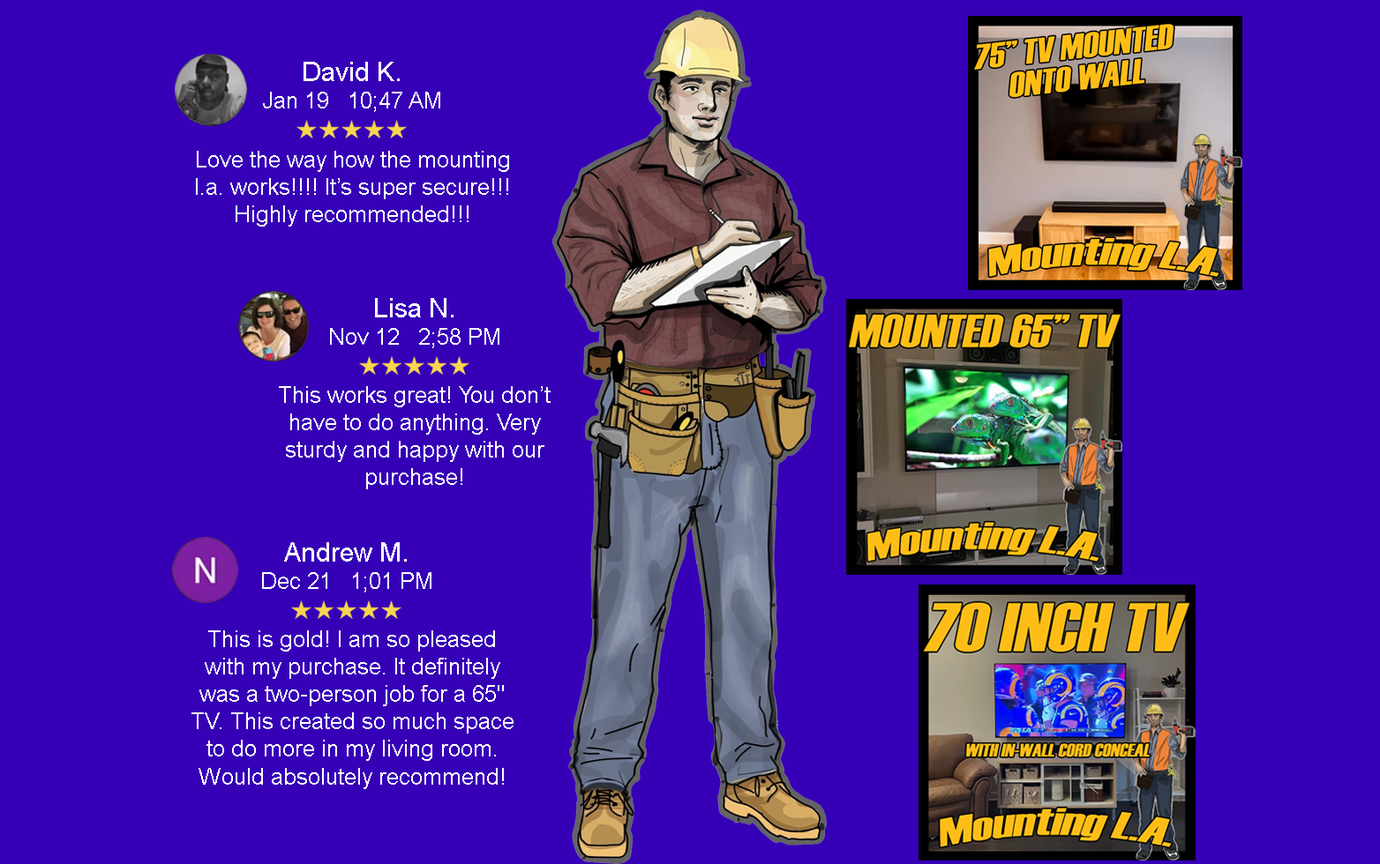
<style>
.page{position:relative;width:1380px;height:864px;background:#3600b7}
.page>*{position:absolute;margin:0}
.t1{font:26.5px "ArialMT";color:#ffffff}
.t2{font:22.9px "ArialMT";color:#ffffff}
</style>
<div class="page">
<p class="t1" style="left:303px;top:62px;width:97px;height:19px">David K.</p>
<p class="t2" style="left:263px;top:92px;width:177px;height:20px">Jan 19   10;47 AM</p>
<p class="t2" style="left:196px;top:151px;width:313px;height:76px;text-align:center">Love the way how the mounting l.a. works!!!! It’s super secure!!! Highly recommended!!!</p>
<p class="t1" style="left:375px;top:298px;width:78px;height:20px">Lisa N.</p>
<p class="t2" style="left:330px;top:328px;width:169px;height:20px">Nov 12   2;58 PM</p>
<p class="t2" style="left:279px;top:386px;width:271px;height:104px;text-align:center">This works great! You don’t have to do anything. Very sturdy and happy with our purchase!</p>
<p class="t1" style="left:284px;top:542px;width:123px;height:20px">Andrew M.</p>
<p class="t2" style="left:262px;top:572px;width:169px;height:21px">Dec 21   1;01 PM</p>
<p class="t2" style="left:191px;top:631px;width:322px;height:158px;text-align:center">This is gold! I am so pleased with my purchase. It definitely was a two-person job for a 65" TV. This created so much space to do more in my living room.   Would absolutely recommend!</p>
</div>
